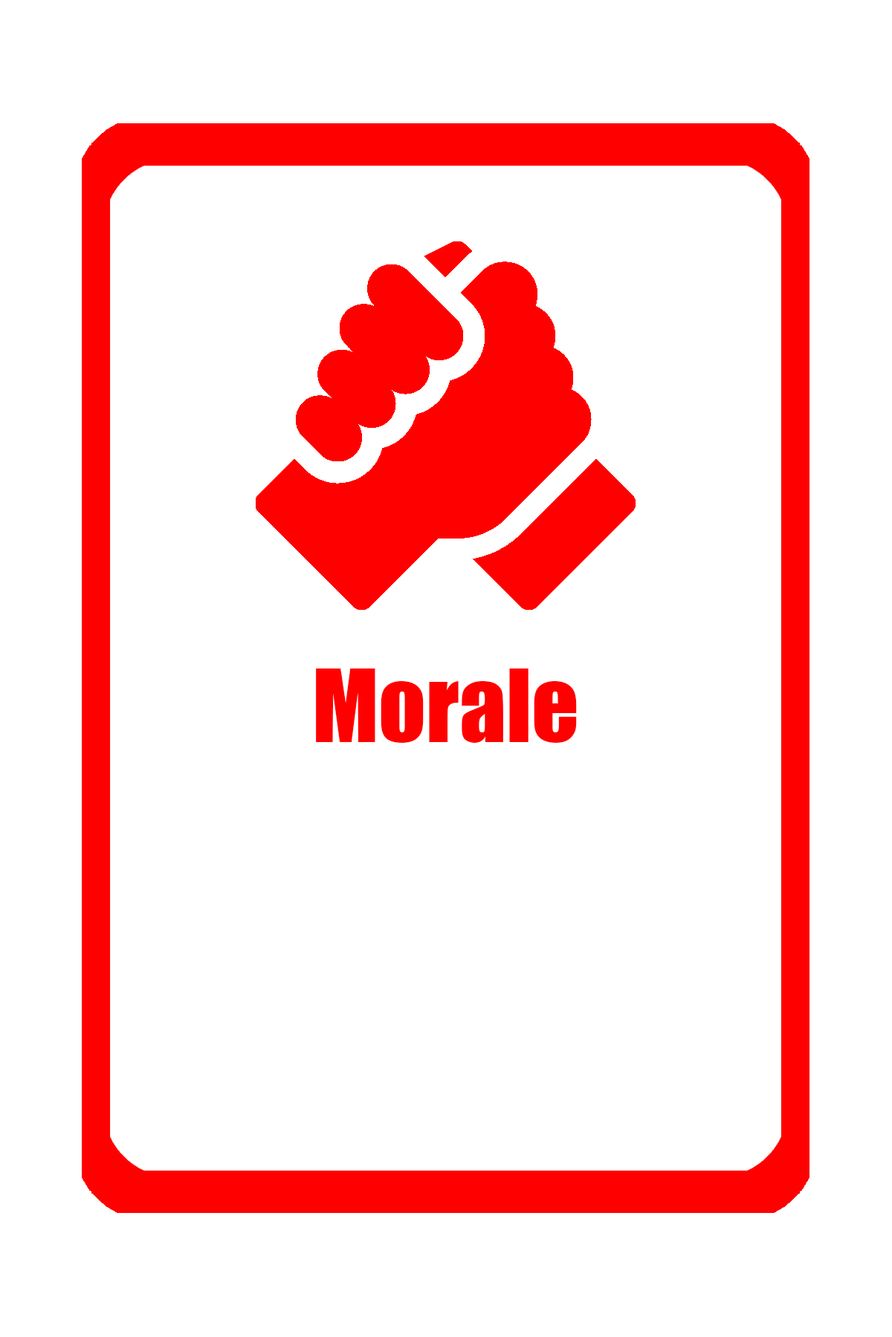
<style>
.page{position:relative;width:892px;height:1337px;background:#ffffff}
.page>*{position:absolute;margin:0}
.t1{font:92.9px "Impact";color:#ff0000}
</style>
<div class="page">
<p class="t1" style="left:316px;top:669px;width:261px;height:74px">Morale</p>
</div>
